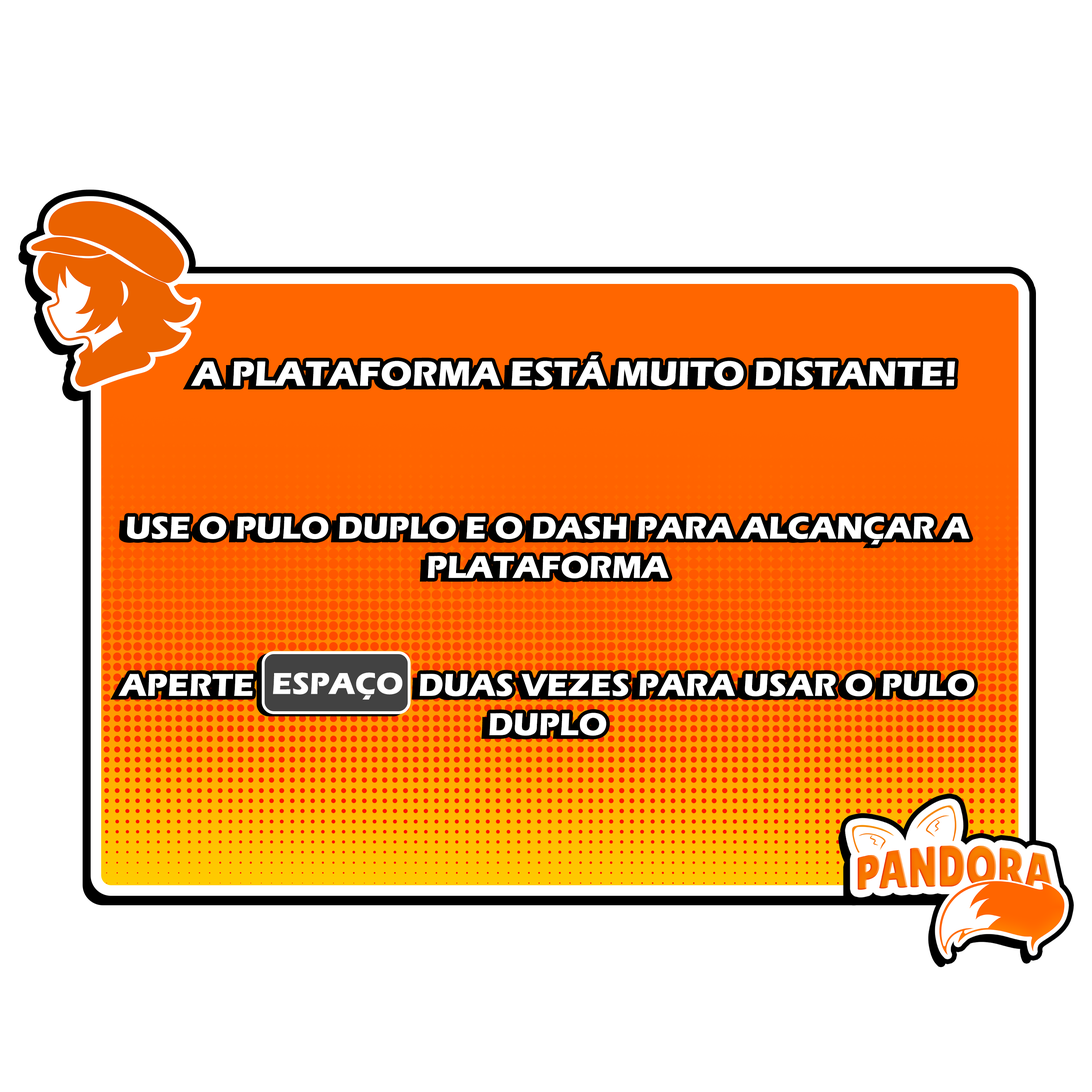
<style>
.page{position:relative;width:1092px;height:1092px;background:#ffffff}
.page>*{position:absolute;margin:0}
.t1{font:32.8px "ErasITC-Bold";color:#ffffff}
.t2{font:36.4px "ErasITC-Bold";color:#ffffff}
.t3{font:31.4px "ErasITC-Bold";color:#ffffff}
</style>
<div class="page">
<p class="t1" style="left:118px;top:355px;width:856px;height:381px;text-align:center"><span class="t2">      A PLATAFORMA ESTÁ MUITO DISTANTE!      <br><br></span><br><br>USE O PULO DUPLO E O DASH PARA ALCANÇAR A PLATAFORMA<br><br><br>APERTE                    DUAS VEZES PARA USAR O PULO DUPLO</p>
<p class="t3" style="left:273px;top:672px;width:130px;height:28px">ESPAÇO</p>
</div>
